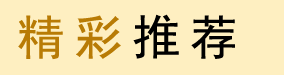
<style>
.page{position:relative;width:284px;height:75px;background:#feefc1}
.page>*{position:absolute;margin:0}
.t1{font:48px "SimHei";letter-spacing:0.2em;color:#b87b05}
.t2{font:48px "SimHei";letter-spacing:0.2em;color:#000000}
</style>
<div class="page">
<p class="t1" style="left:18px;top:14px;width:217px;height:46px">精彩<span class="t2">推荐</span></p>
</div>
